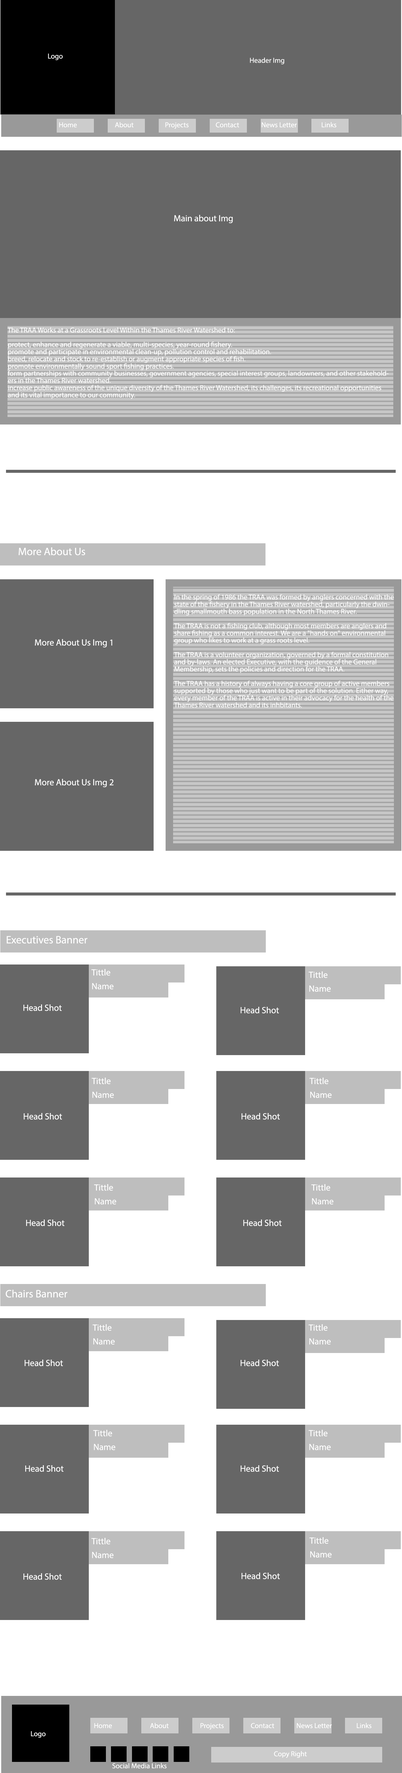
<style>
.page{position:relative;width:402px;height:1773px;background:#ffffff}
.page>*{position:absolute;margin:0}
.t1{font:7.2px "MyriadPro-Regular";color:#ffffff}
.t2{font:9px "MyriadPro-Regular";color:#ffffff}
.t3{font:7.2px/7.2px "MyriadPro-Regular";color:#ffffff}
.t4{font:10.8px "MyriadPro-Regular";color:#ffffff}
</style>
<div class="page">
<p class="t1" style="left:48px;top:53px;width:15px;height:7px">Logo</p>
<p class="t1" style="left:250px;top:58px;width:34px;height:6px">Header Img</p>
<p class="t1" style="left:59px;top:122px;width:18px;height:6px">Home</p>
<p class="t1" style="left:115px;top:122px;width:19px;height:6px">About</p>
<p class="t1" style="left:165px;top:122px;width:24px;height:7px">Projects</p>
<p class="t1" style="left:216px;top:122px;width:23px;height:6px">Contact</p>
<p class="t1" style="left:262px;top:122px;width:35px;height:6px">News Letter</p>
<p class="t1" style="left:322px;top:122px;width:14px;height:6px">Links</p>
<p class="t2" style="left:174px;top:215px;width:59px;height:8px">Main about Img</p>
<p class="t3" style="left:8px;top:327px;width:380px;height:72px">The TRAA Works at a Grassroots Level Within the Thames River Watershed to:<br><br>protect, enhance and regenerate a viable, multi-species, year-round fishery.<br>promote and participate in environmental clean-up, pollution control and rehabilitation.<br>breed, relocate and stock to re-establish or augment appropriate species of fish.<br>promote environmentally sound sport fishing practices.<br>form partnerships with community businesses, government agencies, special interest groups, landowners, and other stakeholders in the Thames River watershed.<br>increase public awareness of the unique diversity of the Thames River Watershed, its challenges, its recreational opportunities and its vital importance to our community.</p>
<p class="t4" style="left:19px;top:547px;width:66px;height:8px"><span class="t2"><br></span>More About Us</p>
<p class="t3" style="left:174px;top:594px;width:220px;height:114px">In the spring of 1986 the TRAA was formed by anglers concerned with the state of the fishery in the Thames River watershed, particularly the dwindling smallmouth bass population in the North Thames River.<br><br>The TRAA is not a fishing club, although most members are anglers and share fishing as a common interest. We are a "hands on" environmental group who likes to work at a grass roots level.<br><br>The TRAA is a volunteer organization, governed by a formal constitution and by-laws. An elected Executive, with the guidence of the General Membership, sets the policies and direction for the TRAA.<br><br>The TRAA has a history of always having a core group of active members supported by those who just want to be part of the solution. Either way, every member of the TRAA is active in their advocacy for the health of the Thames River watershed and its inhbitants.</p>
<p class="t2" style="left:35px;top:639px;width:77px;height:8px">More About Us Img 1</p>
<p class="t2" style="left:35px;top:779px;width:79px;height:8px">More About Us Img 2</p>
<p class="t4" style="left:7px;top:936px;width:81px;height:8px">Executives Banner</p>
<p class="t2" style="left:91px;top:969px;width:19px;height:7px">Tittle</p>
<p class="t2" style="left:308px;top:971px;width:20px;height:7px">Tittle</p>
<p class="t2" style="left:92px;top:983px;width:22px;height:6px">Name</p>
<p class="t2" style="left:309px;top:986px;width:22px;height:6px">Name</p>
<p class="t2" style="left:23px;top:1004px;width:39px;height:7px">Head Shot</p>
<p class="t2" style="left:241px;top:1007px;width:38px;height:6px">Head Shot</p>
<p class="t2" style="left:92px;top:1078px;width:19px;height:6px">Tittle</p>
<p class="t2" style="left:309px;top:1078px;width:19px;height:6px">Tittle</p>
<p class="t2" style="left:92px;top:1092px;width:22px;height:6px">Name</p>
<p class="t2" style="left:310px;top:1092px;width:22px;height:6px">Name</p>
<p class="t2" style="left:24px;top:1113px;width:38px;height:7px">Head Shot</p>
<p class="t2" style="left:242px;top:1113px;width:38px;height:7px">Head Shot</p>
<p class="t2" style="left:94px;top:1184px;width:19px;height:7px">Tittle</p>
<p class="t2" style="left:311px;top:1184px;width:19px;height:7px">Tittle</p>
<p class="t2" style="left:95px;top:1198px;width:21px;height:6px">Name</p>
<p class="t2" style="left:312px;top:1198px;width:22px;height:6px">Name</p>
<p class="t2" style="left:26px;top:1220px;width:38px;height:6px">Head Shot</p>
<p class="t2" style="left:243px;top:1220px;width:39px;height:6px">Head Shot</p>
<p class="t4" style="left:6px;top:1290px;width:62px;height:8px">Chairs Banner</p>
<p class="t2" style="left:92px;top:1324px;width:20px;height:7px">Tittle</p>
<p class="t2" style="left:308px;top:1324px;width:20px;height:7px">Tittle</p>
<p class="t2" style="left:93px;top:1338px;width:22px;height:7px">Name</p>
<p class="t2" style="left:309px;top:1338px;width:22px;height:7px">Name</p>
<p class="t2" style="left:25px;top:1360px;width:38px;height:6px">Head Shot</p>
<p class="t2" style="left:241px;top:1360px;width:38px;height:6px">Head Shot</p>
<p class="t2" style="left:93px;top:1430px;width:19px;height:6px">Tittle</p>
<p class="t2" style="left:308px;top:1430px;width:20px;height:6px">Tittle</p>
<p class="t2" style="left:94px;top:1444px;width:22px;height:6px">Name</p>
<p class="t2" style="left:309px;top:1444px;width:22px;height:6px">Name</p>
<p class="t2" style="left:25px;top:1465px;width:39px;height:7px">Head Shot</p>
<p class="t2" style="left:241px;top:1465px;width:38px;height:7px">Head Shot</p>
<p class="t2" style="left:91px;top:1538px;width:19px;height:6px">Tittle</p>
<p class="t2" style="left:309px;top:1537px;width:19px;height:7px">Tittle</p>
<p class="t2" style="left:92px;top:1552px;width:22px;height:6px">Name</p>
<p class="t2" style="left:310px;top:1551px;width:22px;height:7px">Name</p>
<p class="t2" style="left:23px;top:1573px;width:39px;height:7px">Head Shot</p>
<p class="t2" style="left:242px;top:1573px;width:38px;height:6px">Head Shot</p>
<p class="t1" style="left:31px;top:1731px;width:15px;height:7px">Logo</p>
<p class="t1" style="left:94px;top:1723px;width:18px;height:5px">Home</p>
<p class="t1" style="left:150px;top:1723px;width:19px;height:5px">About</p>
<p class="t1" style="left:200px;top:1723px;width:24px;height:7px">Projects</p>
<p class="t1" style="left:251px;top:1723px;width:23px;height:5px">Contact</p>
<p class="t1" style="left:297px;top:1723px;width:35px;height:5px">News Letter</p>
<p class="t1" style="left:357px;top:1723px;width:14px;height:5px">Links</p>
<p class="t1" style="left:274px;top:1751px;width:33px;height:7px">Copy Right</p>
<p class="t1" style="left:112px;top:1763px;width:54px;height:5px">Social Media Links</p>
</div>
